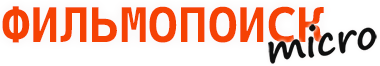
<style>
.page{position:relative;width:380px;height:66px;background:#ffffff}
.page>*{position:absolute;margin:0}
.t1{font:50.3px "CascadiaCodeRoman-Bold";color:#f54204}
</style>
<div class="page">
<p class="t1" style="left:2px;top:6px;width:323px;height:37px">ФИЛЬМОПОИСК</p>
</div>
